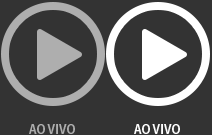
<style>
.page{position:relative;width:212px;height:135px;background:#333333}
.page>*{position:absolute;margin:0}
.t1{font:14px "MyriadPro-SemiboldSemiCn";color:#aeaeae;text-transform:uppercase}
.t2{font:14px "MyriadPro-SemiboldSemiCn";color:#ffffff;text-transform:uppercase}
</style>
<div class="page">
<p class="t1" style="left:29px;top:124px;width:46px;height:10px">Ao vivo</p>
<p class="t2" style="left:134px;top:124px;width:46px;height:10px">Ao vivo</p>
</div>
